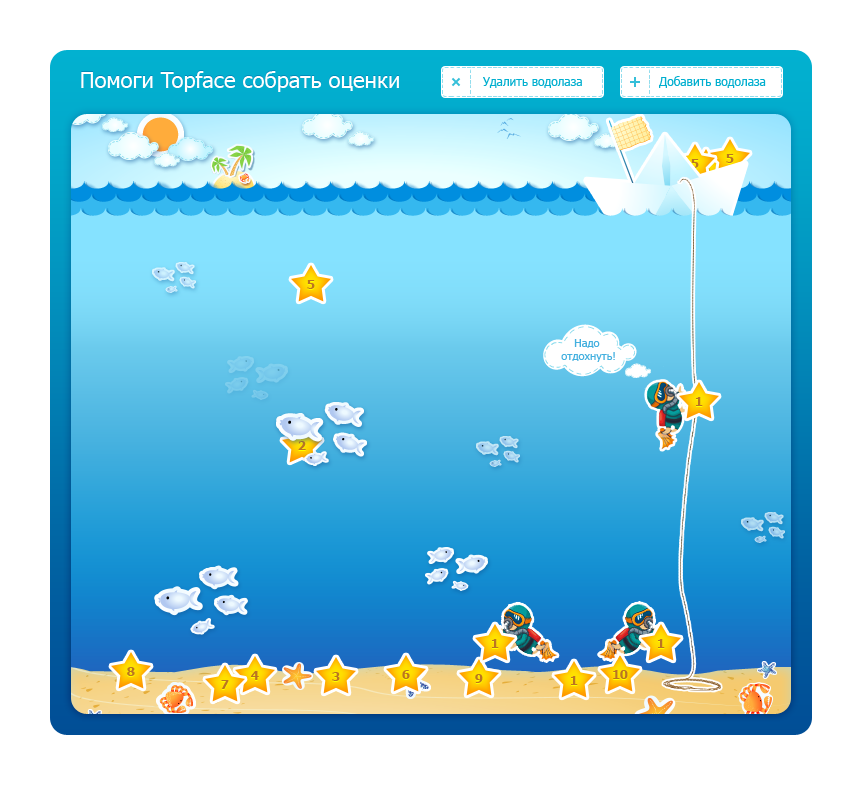
<style>
.page{position:relative;width:862px;height:785px;background:#ffffff}
.page>*{position:absolute;margin:0}
.t1{font:22px "Tahoma";color:#ffffff}
.t2{font:12px "Tahoma";color:#02afcf}
.t3{font:11px/13px "Tahoma";color:#44b0df}
</style>
<div class="page">
<p class="t1" style="left:81px;top:71px;width:318px;height:21px">Помоги Topface собрать оценки</p>
<p class="t2" style="left:483px;top:77px;width:99px;height:11px">Удалить водолаза</p>
<p class="t2" style="left:659px;top:76px;width:107px;height:12px">Добавить водолаза</p>
<p class="t3" style="left:561px;top:339px;width:54px;height:23px;text-align:center">Надо <br>отдохнуть!</p>
</div>
